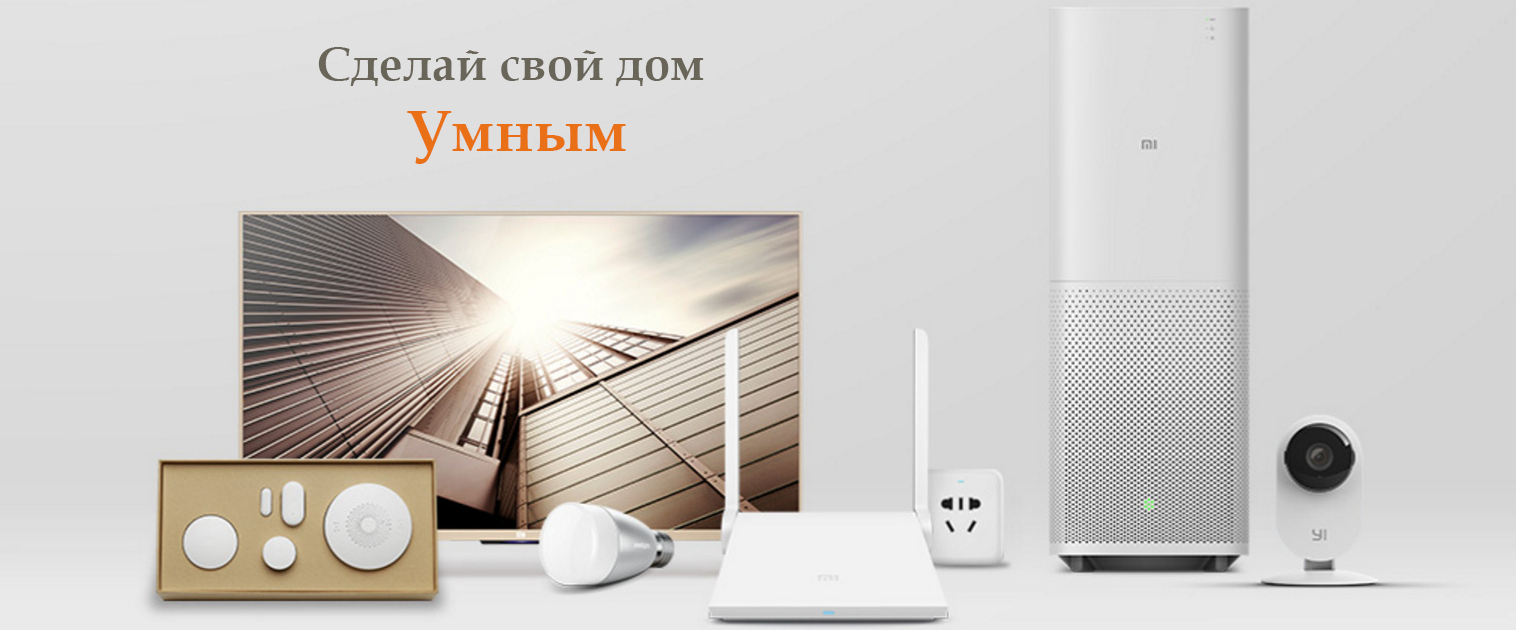
<style>
.page{position:relative;width:1516px;height:630px}
.page>*{position:absolute;margin:0}
.t1{font:47.4px "BookAntiqua-Bold";color:#696559}
.t2{font:59.3px "BookAntiqua-Bold";color:#ea7017}
</style>
<div class="page">
<p class="t1" style="left:318px;top:47px;width:386px;height:117px;text-align:center">Сделай свой дом <br><span class="t2">Умным</span></p>
</div>
